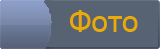
<style>
.page{position:relative;width:160px;height:49px;background:#576272}
.page>*{position:absolute;margin:0}
.t1{font:30px "Tahoma";color:#eba90a}
</style>
<div class="page">
<p class="t1" style="left:70px;top:10px;width:68px;height:22px">Фото</p>
</div>
